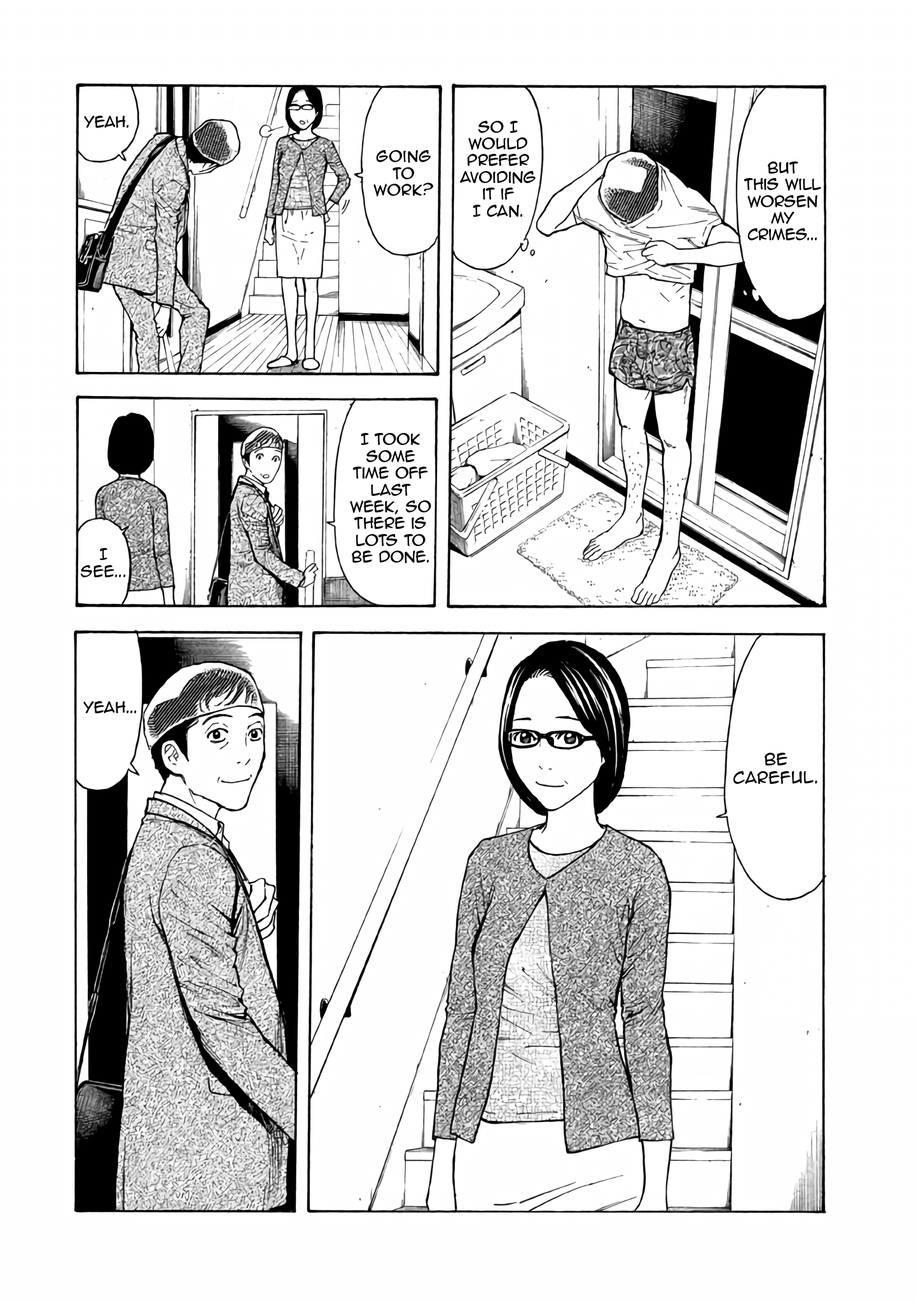
<style>
.page{position:relative;width:916px;height:1302px;background:#ffffff}
.page>*{position:absolute;margin:0}
.t1{font:14px "AnimeAce2.0BB";color:#000000}
.t2{font:15.3px "AnimeAce2.0BB";color:#000000}
</style>
<div class="page">
<p class="t1" style="left:84px;top:116px;width:45px;height:12px">Yeah.</p>
<p class="t1" style="left:460px;top:121px;width:75px;height:96px;text-align:center">So I would prefer avoiding it if <br>I can.</p>
<p class="t1" style="left:373px;top:150px;width:60px;height:46px;text-align:center">Going  to work?</p>
<p class="t1" style="left:743px;top:162px;width:78px;height:78px;text-align:center">But <br>this will worsen my crimes...</p>
<p class="t1" style="left:350px;top:433px;width:81px;height:130px;text-align:center">I took some time off last week, so there is lots to be done.</p>
<p class="t1" style="left:81px;top:548px;width:44px;height:29px;text-align:center">I see...</p>
<p class="t1" style="left:83px;top:701px;width:54px;height:12px">Yeah...</p>
<p class="t2" style="left:733px;top:753px;width:84px;height:31px;text-align:center">Be careful.</p>
</div>
